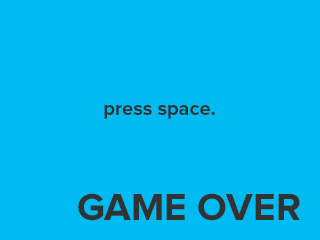
<style>
.page{position:relative;width:320px;height:240px;background:#00bbf2}
.page>*{position:absolute;margin:0}
.t1{font:20px "ProximaNova-Bold";color:#323232}
.t2{font:39px "ProximaNova-Bold";color:#323232}
</style>
<div class="page">
<p class="t1" style="left:104px;top:105px;width:111px;height:14px">press space.</p>
<p class="t2" style="left:78px;top:193px;width:222px;height:28px">GAME OVER</p>
</div>
